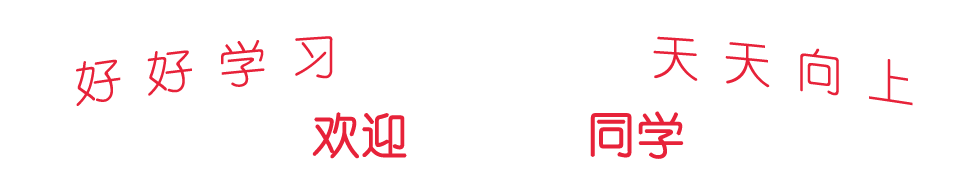
<style>
.page{position:relative;width:980px;height:170px;background:#ffffff}
.page>*{position:absolute;margin:0}
.t1{font:48px "YouYuan";color:#e72239}
.t2{font:48px "YouYuan";color:#e72239;font-weight:bold}
</style>
<div class="page">
<p class="t1" style="left:76px;top:36px;width:837px;height:70px">好 好 学 习             天 天 向 上</p>
<p class="t2" style="left:312px;top:111px;width:372px;height:48px">欢迎       同学</p>
</div>
